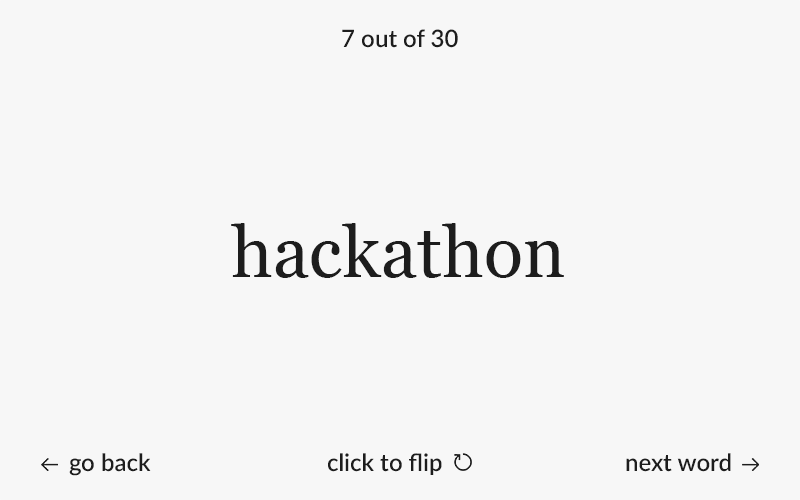
<style>
.page{position:relative;width:800px;height:500px;background:#f7f7f7}
.page>*{position:absolute;margin:0}
.t1{font:24px "Lato-Semibold";color:#1d1d1d}
.t2{font:72px "Georgia";color:#1d1d1d}
</style>
<div class="page">
<p class="t1" style="left:342px;top:29px;width:116px;height:19px">7 out of 30</p>
<p class="t2" style="left:231px;top:223px;width:333px;height:55px">hackathon</p>
<p class="t1" style="left:69px;top:453px;width:82px;height:23px">go back</p>
<p class="t1" style="left:328px;top:453px;width:114px;height:22px">click to flip</p>
<p class="t1" style="left:626px;top:453px;width:105px;height:19px">next word</p>
</div>
